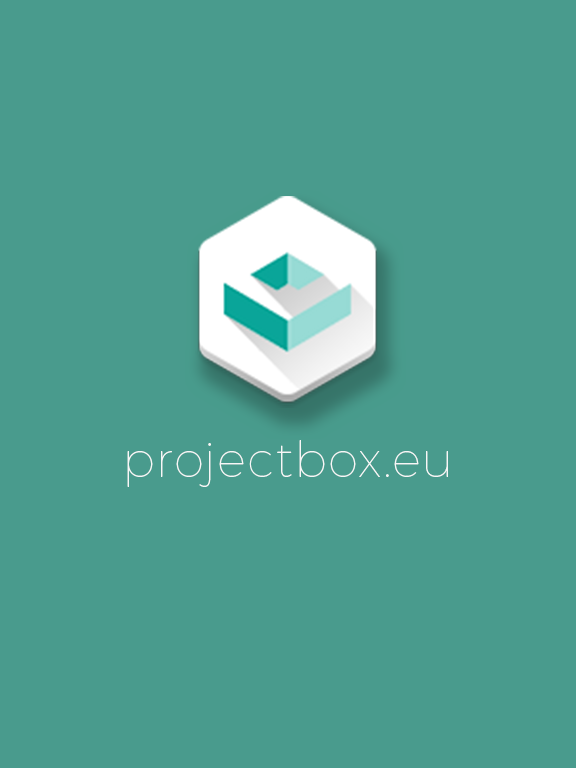
<style>
.page{position:relative;width:576px;height:768px;background:#499b8d}
.page>*{position:absolute;margin:0}
.t1{font:49.3px "Montserrat-Thin";letter-spacing:0.025em;color:#f8f8f8}
</style>
<div class="page">
<p class="t1" style="left:127px;top:440px;width:321px;height:47px">projectbox.eu</p>
</div>
